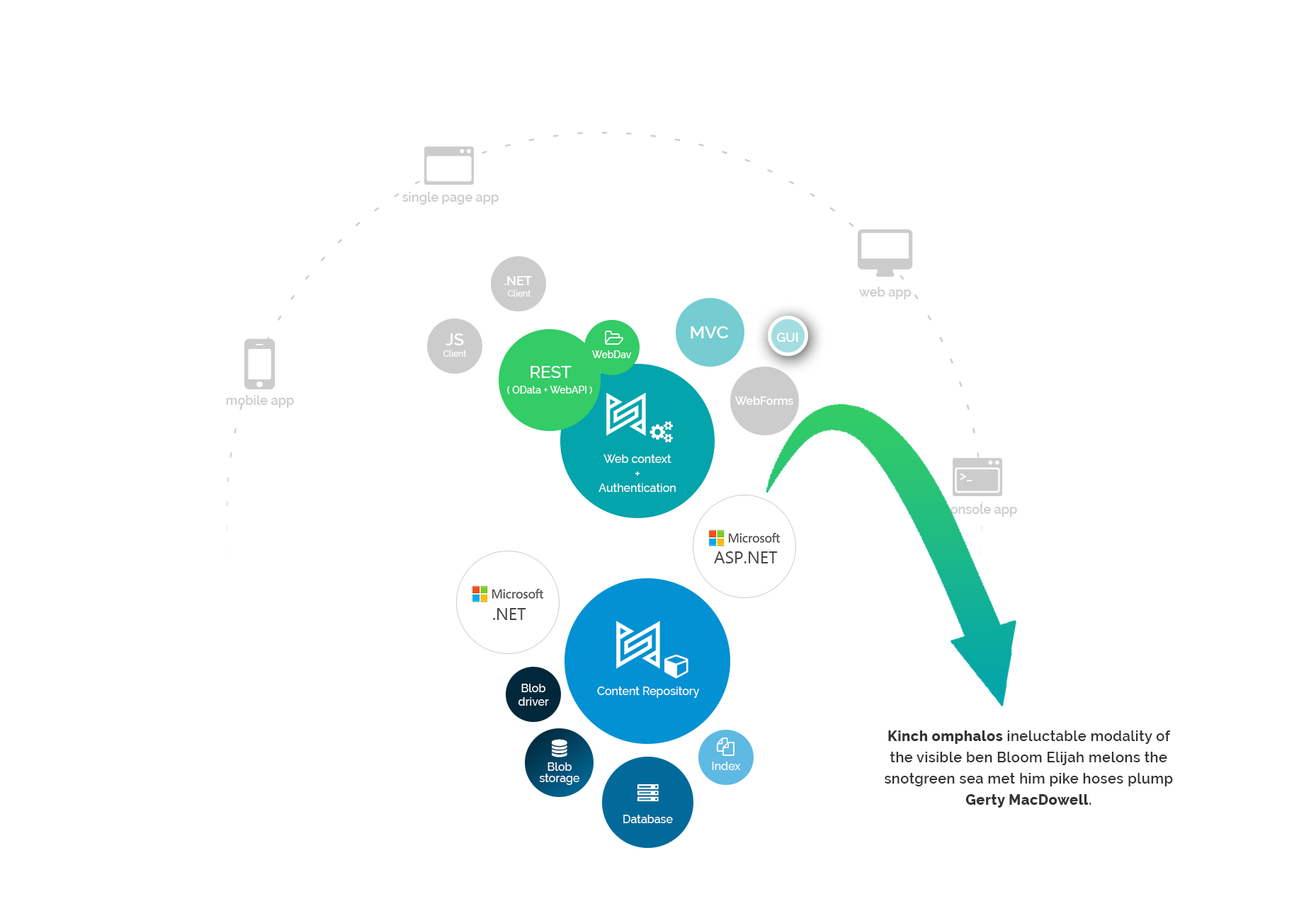
<style>
.page{position:relative;width:1316px;height:906px;background:#ffffff}
.page>*{position:absolute;margin:0}
.t1{font:12.7px "Raleway-SemiBold";color:#cccccc}
.t2{font:8.5px/11.3px "Raleway-Medium";color:#ffffff}
.t3{font:12.7px/11.3px "Raleway-SemiBold";color:#ffffff}
.t4{font:17.7px "Raleway-SemiBold";color:#ffffff}
.t5{font:17px/11.3px "Raleway-SemiBold";color:#ffffff}
.t6{font:12.7px "Raleway-SemiBold";color:#ffffff}
.t7{font:9.9px "Raleway-Medium";color:#ffffff}
.t8{font:17px "Raleway-Medium";color:#ffffff}
.t9{font:11.3px "Raleway-SemiBold";color:#ffffff}
.t10{font:11.3px "Raleway-Medium";color:#ffffff}
.t11{font:12.7px "Raleway-Medium";color:#ffffff}
.t12{font:17px "SegoeUI";color:#444444}
.t13{font:14.2px/21.2px "Raleway-SemiBold";letter-spacing:0.025em;color:#333333}
.t14{font:14.2px/21.2px "Raleway-ExtraBold";letter-spacing:0.025em;color:#333333}
.t15{font:11.3px/11.3px "Raleway-Medium";color:#ffffff}
</style>
<div class="page">
<p class="t1" style="left:402px;top:192px;width:96px;height:13px">single page app</p>
<p class="t2" style="left:504px;top:276px;width:28px;height:21px;text-align:center"><span class="t3">.NET <br></span>Client</p>
<p class="t1" style="left:859px;top:287px;width:52px;height:13px">web app</p>
<p class="t4" style="left:690px;top:326px;width:38px;height:12px">MVC</p>
<p class="t2" style="left:443px;top:334px;width:24px;height:23px;text-align:center"><span class="t5">JS<br></span>Client</p>
<p class="t6" style="left:776px;top:333px;width:22px;height:9px">GUI</p>
<p class="t7" style="left:591px;top:351px;width:41px;height:7px">WebDav</p>
<p class="t8" style="left:530px;top:366px;width:41px;height:12px">REST</p>
<p class="t7" style="left:507px;top:386px;width:85px;height:8px">( OData + WebAPI )</p>
<p class="t1" style="left:226px;top:395px;width:68px;height:13px">mobile app</p>
<p class="t9" style="left:734px;top:397px;width:59px;height:8px">WebForms</p>
<p class="t10" style="left:598px;top:455px;width:78px;height:37px;text-align:center">Web context<br><span class="t11">+<br></span>Authentication</p>
<p class="t6" style="left:959px;top:473px;width:13px;height:9px">&gt;_</p>
<p class="t1" style="left:943px;top:504px;width:74px;height:13px">console app</p>
<p class="t12" style="left:714px;top:552px;width:63px;height:12px">ASP.NET</p>
<p class="t12" style="left:493px;top:608px;width:33px;height:12px">.NET</p>
<p class="t10" style="left:518px;top:684px;width:31px;height:22px;text-align:center">Blob<br>driver</p>
<p class="t10" style="left:597px;top:687px;width:103px;height:11px">Content Repository</p>
<p class="t13" style="left:884px;top:731px;width:289px;height:77px;text-align:center"><span class="t14">Kinch omphalos</span> ineluctable modality of the visible ben Bloom Elijah melons the snotgreen sea met him pike hoses plump <span class="t14">Gerty MacDowell</span>.</p>
<p class="t10" style="left:712px;top:762px;width:29px;height:8px">Index</p>
<p class="t15" style="left:539px;top:763px;width:41px;height:22px;text-align:center">Blob storage</p>
<p class="t10" style="left:623px;top:815px;width:50px;height:9px">Database</p>
</div>
